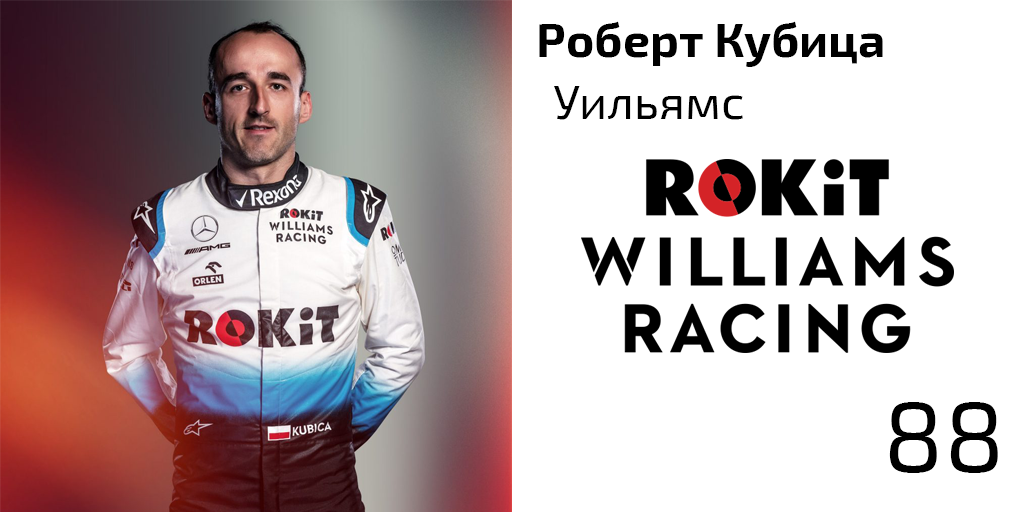
<style>
.page{position:relative;width:1024px;height:512px;background:#ffffff}
.page>*{position:absolute;margin:0}
.t1{font:48px "Exo2-Bold";color:#000000}
.t2{font:48px "Exo2-Regular";color:#000000}
.t3{font:100px "Exo2-Regular";color:#000000}
</style>
<div class="page">
<p class="t1" style="left:539px;top:21px;width:344px;height:46px">Роберт Кубица</p>
<p class="t2" style="left:554px;top:86px;width:189px;height:34px">Уильямс</p>
<p class="t3" style="left:889px;top:402px;width:109px;height:71px">88</p>
</div>
